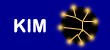
<style>
.page{position:relative;width:110px;height:50px;background:#000090}
.page>*{position:absolute;margin:0}
.t1{font:18px "ArialRoundedMTBold";color:#ffffff}
</style>
<div class="page">
<p class="t1" style="left:14px;top:18px;width:32px;height:15px">KIM</p>
</div>
